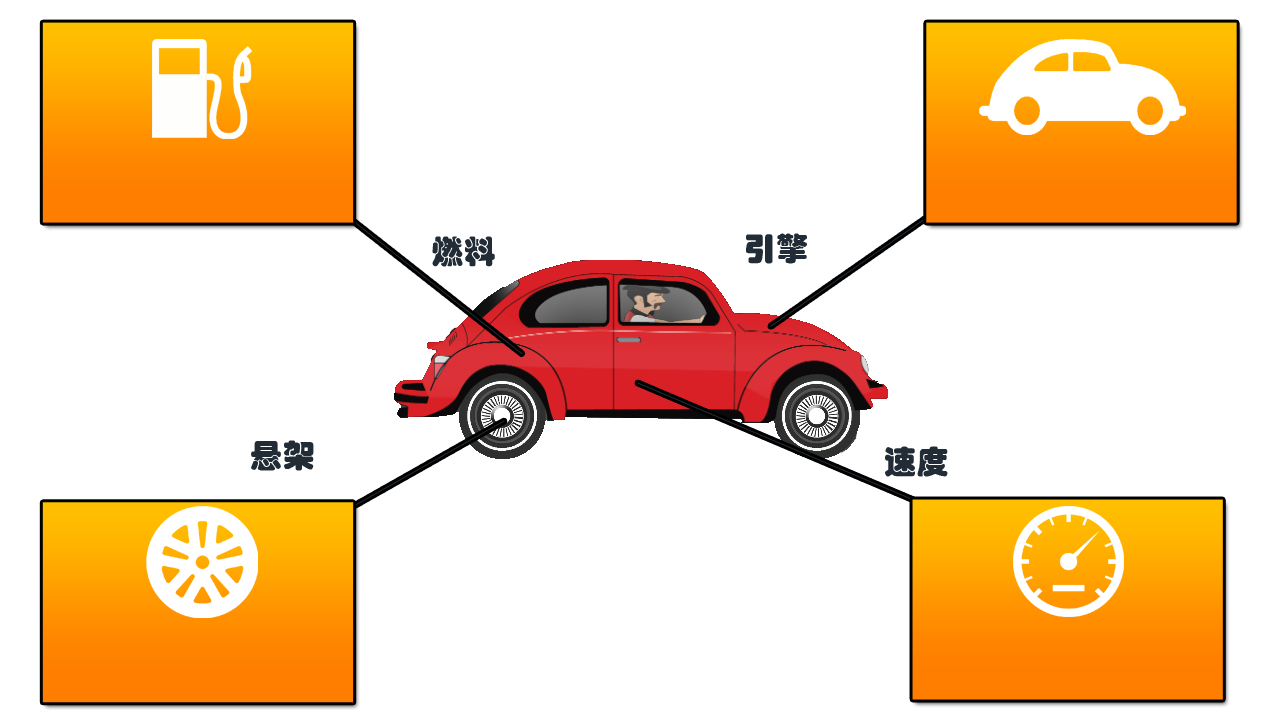
<style>
.page{position:relative;width:1280px;height:720px;background:#ffffff}
.page>*{position:absolute;margin:0}
.t1{font:32px "STHupo";letter-spacing:0.012em;color:#222c36}
</style>
<div class="page">
<p class="t1" style="left:746px;top:233px;width:61px;height:31px">引擎</p>
<p class="t1" style="left:432px;top:236px;width:63px;height:31px">燃料</p>
<p class="t1" style="left:251px;top:440px;width:63px;height:31px">悬架</p>
<p class="t1" style="left:885px;top:446px;width:63px;height:31px">速度</p>
</div>
